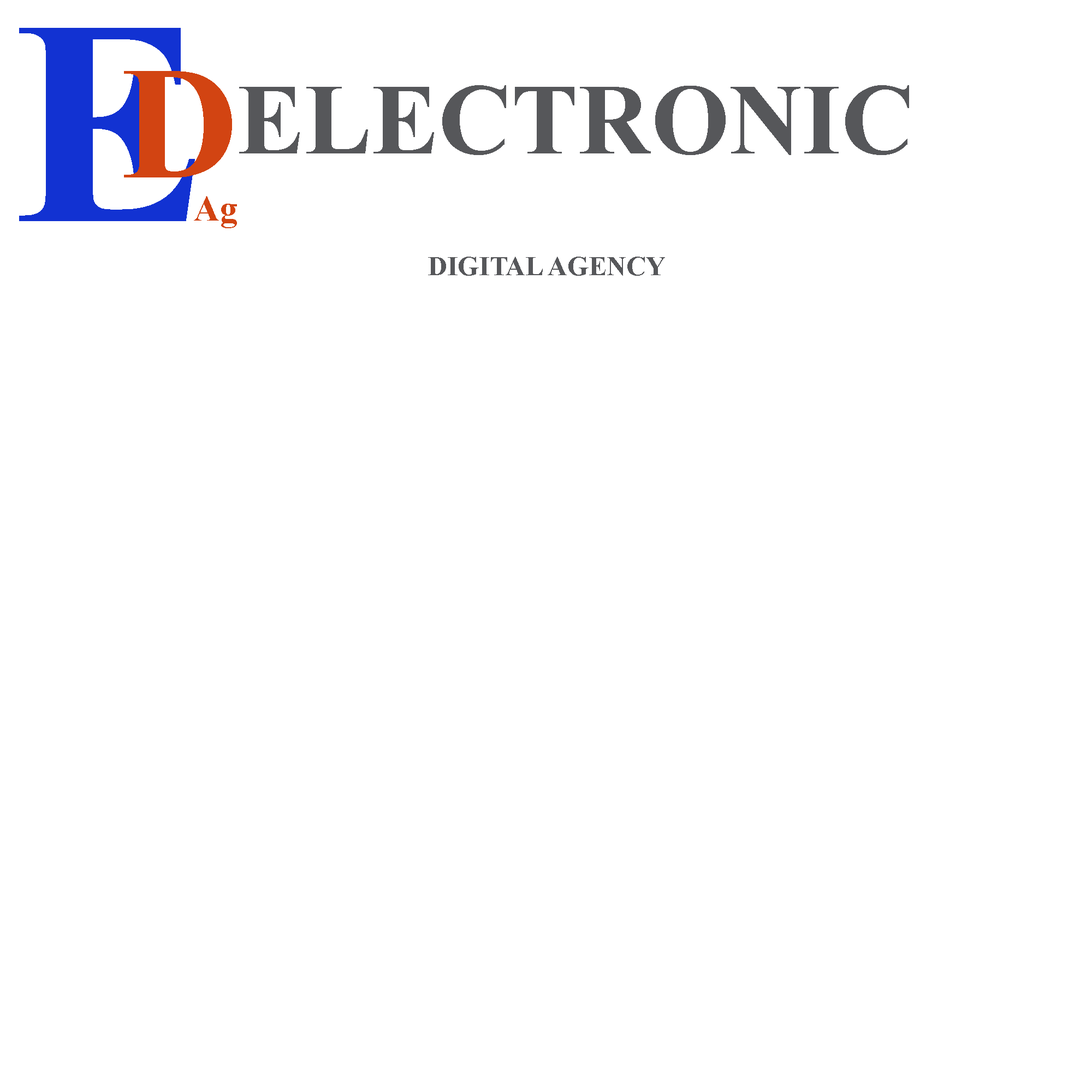
<style>
.page{position:relative;width:1092px;height:1092px;background:#ffffff}
.page>*{position:absolute;margin:0}
.t1{font:100.7px "TimesNewRomanPS-BoldMT";color:#56575a}
.t2{font:27.3px "TimesNewRomanPS-BoldMT";color:#56575a}
</style>
<div class="page">
<p class="t1" style="left:239px;top:85px;width:670px;height:70px">ELECTRONIC</p>
<p class="t2" style="left:428px;top:257px;width:237px;height:19px">DIGITAL AGENCY</p>
</div>
